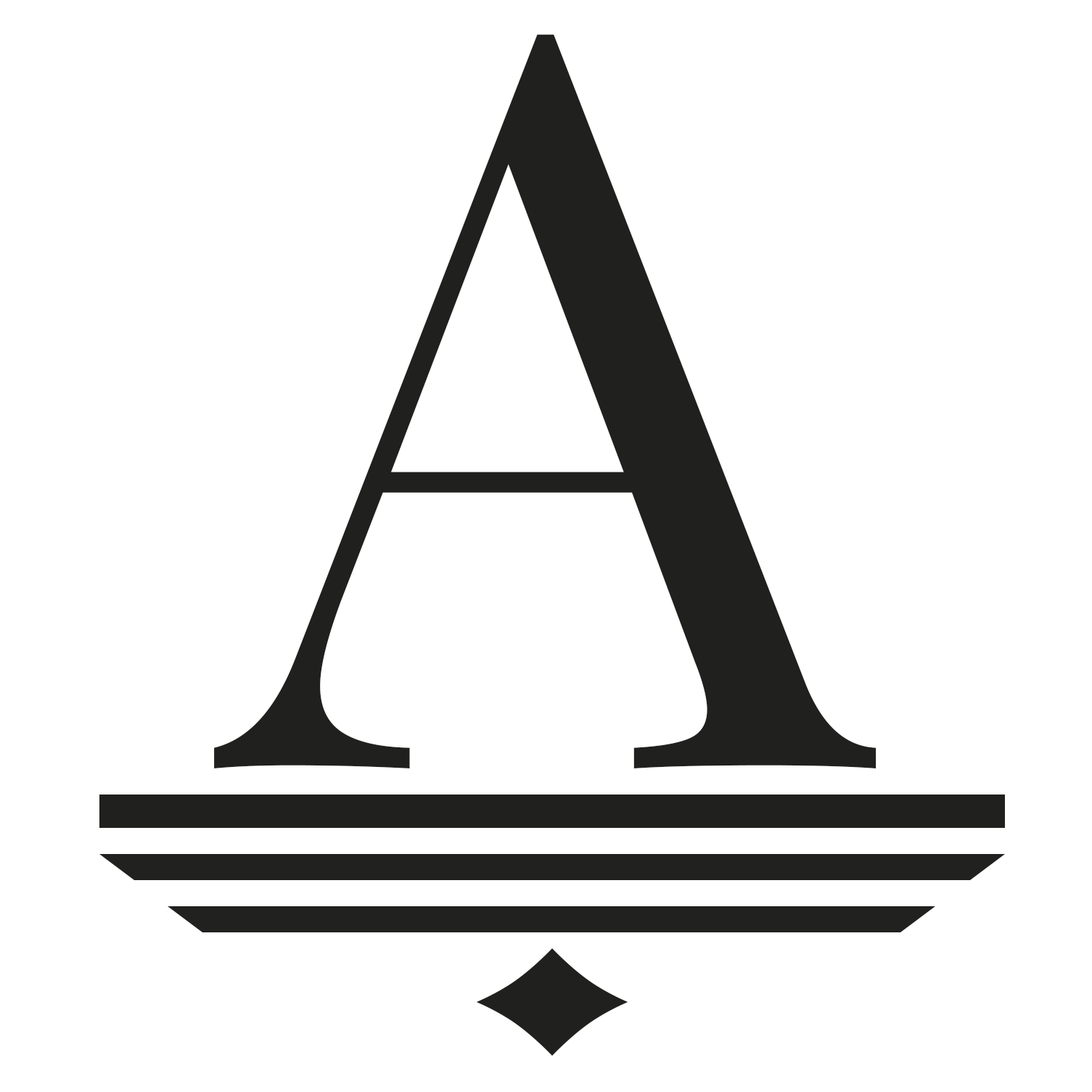
<style>
.page{position:relative;width:1092px;height:1092px;background:#ffffff}
.page>*{position:absolute;margin:0}
.t1{font:1029.2px "PlayfairDisplay-Regular";color:#20201e}
</style>
<div class="page">
<p class="t1" style="left:214px;top:34px;width:662px;height:734px">A</p>
</div>
